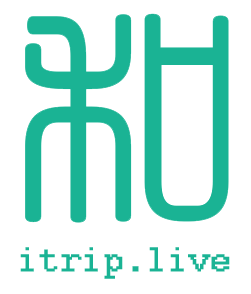
<style>
.page{position:relative;width:251px;height:294px;background:#ffffff}
.page>*{position:absolute;margin:0}
.t1{font:38px "Courier";color:#1ab394;font-weight:bold}
</style>
<div class="page">
<p class="t1" style="left:20px;top:247px;width:210px;height:32px">itrip.live</p>
</div>
